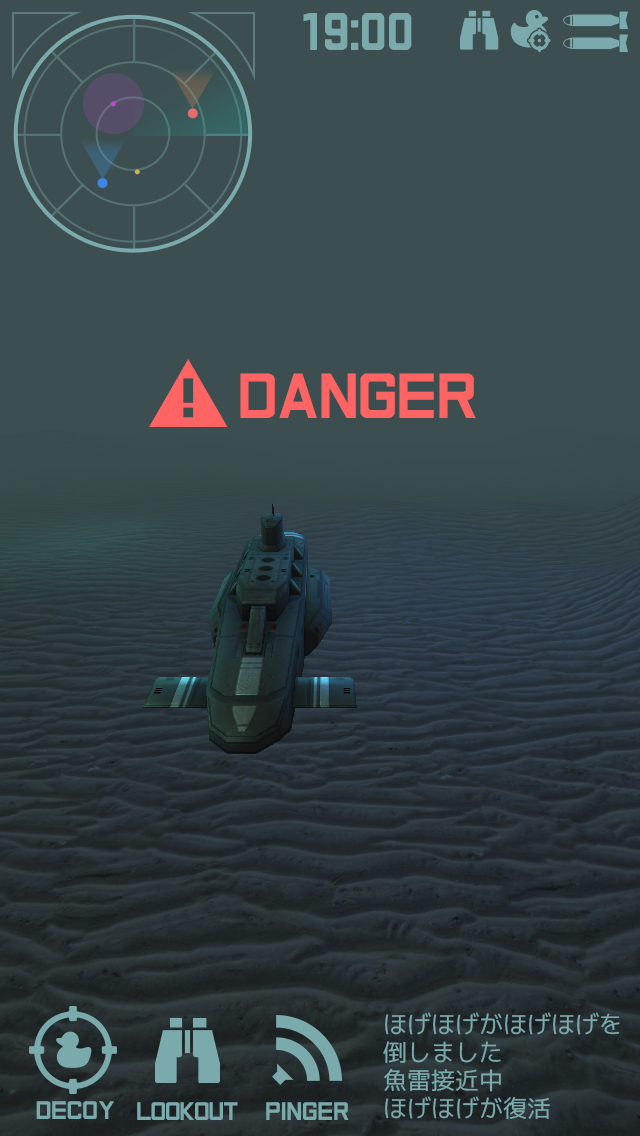
<style>
.page{position:relative;width:640px;height:1136px;background:#3c4e50}
.page>*{position:absolute;margin:0}
.t1{font:46px "GRATIS";color:#7baaad}
.t2{font:55.1px "GRATIS";color:#ff6464}
.t3{font:24px/28px "mplus-1m-regular";color:#7baaad}
.t4{font:22px "GRATIS";color:#7baaad}
.t5{font:22px "GRATIS";letter-spacing:-0.05em;color:#7baaad}
</style>
<div class="page">
<p class="t1" style="left:303px;top:13px;width:109px;height:37px">19:00</p>
<p class="t2" style="left:240px;top:373px;width:236px;height:45px">DANGER</p>
<p class="t3" style="left:383px;top:1012px;width:237px;height:108px">ほげほげがほげほげを<br>倒しました<br>魚雷接近中<br>ほげほげが復活</p>
<p class="t4" style="left:36px;top:1101px;width:78px;height:18px">DECOY</p>
<p class="t5" style="left:137px;top:1102px;width:101px;height:18px">LOOKOUT</p>
<p class="t4" style="left:266px;top:1102px;width:83px;height:18px">PINGER</p>
</div>
